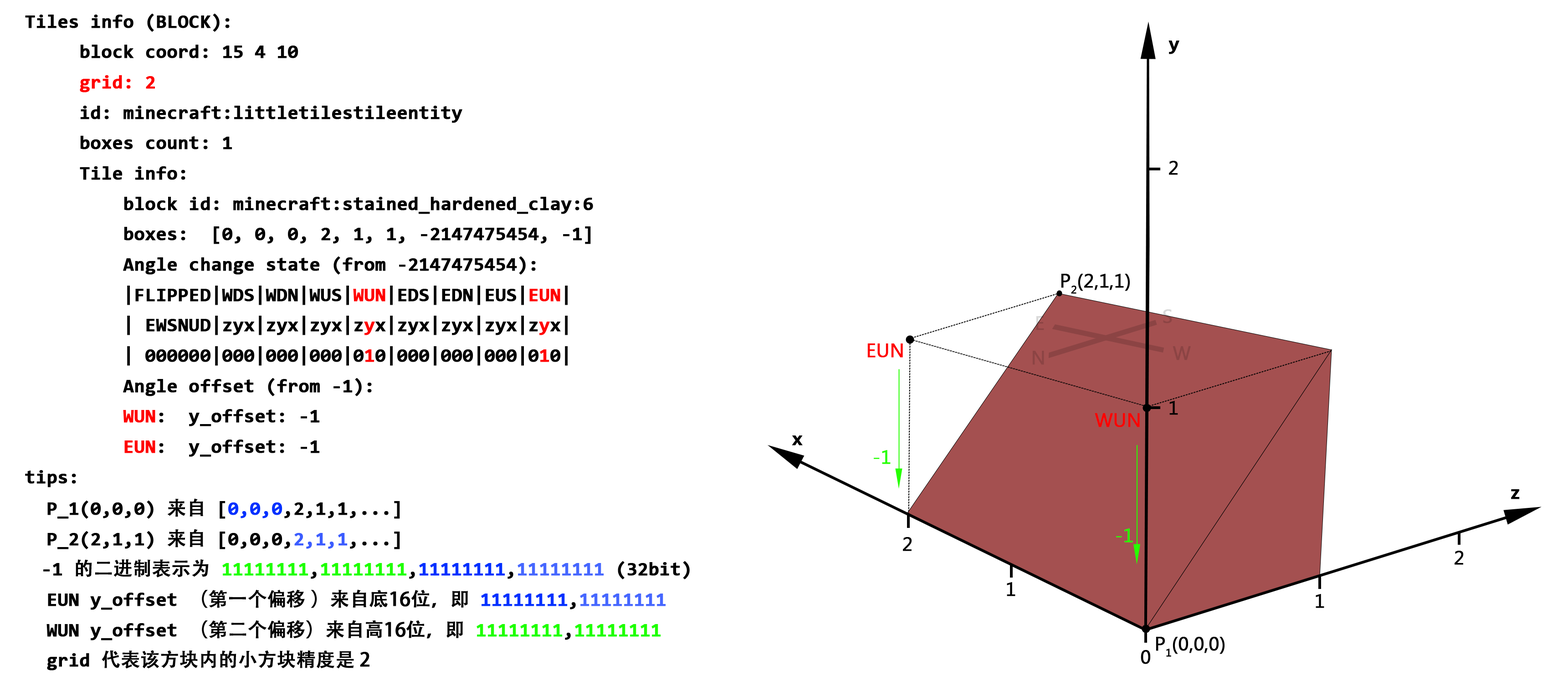
<style>
.page{position:relative;width:1568px;height:691px;background:#ffffff}
.page>*{position:absolute;margin:0}
.t1{font:19px/30.4px "Consolas-Bold";color:#000000;font-weight:bold}
.t2{font:19px/30.4px "Consolas-Bold";color:#fe0000;font-weight:bold}
.t3{font:19px/30.4px "Consolas-Bold";color:#ff0000;font-weight:bold}
.t4{font:19px/30.4px "AdobeHeitiStd-Regular";color:#000000;font-weight:bold}
.t5{font:19px/30.4px "Consolas-Bold";color:#0030ff;font-weight:bold}
.t6{font:19px/30.4px "Consolas-Bold";color:#3b5cff;font-weight:bold}
.t7{font:19px/30.4px "Consolas-Bold";color:#1eff00;font-weight:bold}
.t8{font:19px/30.4px "Consolas-Bold";color:#4667ff;font-weight:bold}
.t9{font:19px "Consolas-Bold";color:#000000;font-weight:bold}
.t10{font:19px "MicrosoftTaiLe";color:#000000;font-weight:bold}
.t11{font:19px "MicrosoftTaiLe";color:#ff0000;font-weight:bold}
.t12{font:19px "MicrosoftTaiLe";color:#8c4444;font-weight:bold}
.t13{font:19px "MicrosoftTaiLe";color:#26ff00;font-weight:bold}
</style>
<div class="page">
<p class="t1" style="left:25px;top:14px;width:665px;height:657px">Tiles info (BLOCK):<br>     block coord: 15 4 10<br>     <span class="t2">grid: 2<br></span>     id: minecraft:littletilestileentity<br>     boxes count: 1<br>     Tile info:<br>         block id: minecraft:stained_hardened_clay:6<br>         boxes:  [0, 0, 0, 2, 1, 1, -2147475454, -1]<br>         Angle change state (from -2147475454):<br>         |FLIPPED|WDS|WDN|WUS|<span class="t3">WUN</span>|EDS|EDN|EUS|<span class="t3">EUN</span>|<br>         | EWSNUD|zyx|zyx|zyx|z<span class="t3">y</span>x|zyx|zyx|zyx|z<span class="t3">y</span>x|<br>         | 000000|000|000|000|0<span class="t3">1</span>0|000|000|000|0<span class="t3">1</span>0|<br>         Angle offset (from -1):<br>         <span class="t3">WUN</span>:  y_offset: -1<br>         <span class="t3">EUN</span>:  y_offset: -1<br>tips:<br>  P_1(0,0,0) <span class="t4">来自</span> [<span class="t5">0,0,0</span>,2,1,1,...]<br>  P_2(2,1,1) <span class="t4">来自</span> [0,0,0,<span class="t6">2,1,1</span>,...]<br> -1 <span class="t4">的二进制表示为 </span><span class="t7">11111111</span>,<span class="t7">11111111</span>,<span class="t5">11111111</span>,<span class="t8">11111111</span> (32bit)<br>  EUN y_offset <span class="t4">（第一个偏移 ）来自底16位，即 </span><span class="t5">11111111</span>,<span class="t8">11111111<br></span>  WUN y_offset <span class="t4">（第二个偏移）来自高16位，即 </span><span class="t7">11111111</span>,<span class="t7">11111111<br>  </span>grid <span class="t4">代表该方块内的小方块精度是 2</span></p>
<p class="t9" style="left:1168px;top:41px;width:11px;height:13px">y</p>
<p class="t10" style="left:1169px;top:161px;width:9px;height:14px">2</p>
<p class="t10" style="left:1061px;top:274px;width:69px;height:20px">P2(2,1,1)</p>
<p class="t11" style="left:867px;top:343px;width:36px;height:15px">EUN</p>
<p class="t12" style="left:1032px;top:351px;width:12px;height:14px">N</p>
<p class="t12" style="left:1173px;top:346px;width:18px;height:14px">W</p>
<p class="t10" style="left:1169px;top:401px;width:9px;height:14px">1</p>
<p class="t11" style="left:1095px;top:413px;width:45px;height:14px">WUN</p>
<p class="t9" style="left:792px;top:436px;width:11px;height:10px">x</p>
<p class="t13" style="left:874px;top:450px;width:17px;height:14px">-1</p>
<p class="t9" style="left:1511px;top:489px;width:9px;height:10px">z</p>
<p class="t13" style="left:1116px;top:528px;width:17px;height:15px">-1</p>
<p class="t10" style="left:903px;top:537px;width:9px;height:14px">2</p>
<p class="t10" style="left:1455px;top:551px;width:9px;height:14px">2</p>
<p class="t10" style="left:1007px;top:582px;width:8px;height:14px">1</p>
<p class="t10" style="left:1316px;top:594px;width:8px;height:14px">1</p>
<p class="t10" style="left:1156px;top:637px;width:69px;height:20px">P1(0,0,0)</p>
<p class="t10" style="left:1141px;top:650px;width:9px;height:14px">0</p>
</div>
